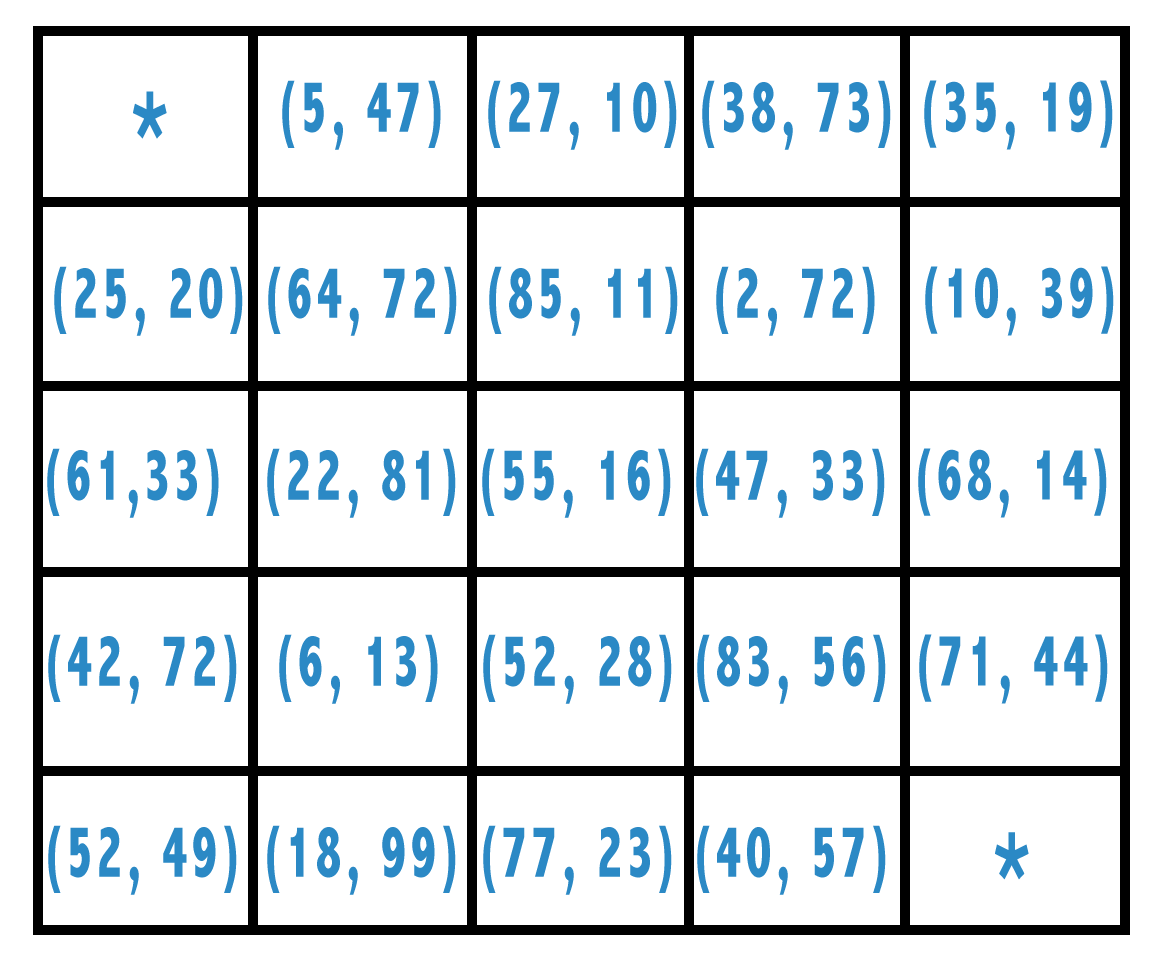
<style>
.page{position:relative;width:1162px;height:964px;background:#ffffff}
.page>*{position:absolute;margin:0}
.t1{font:75px "AbadiMT-CondensedExtraBold";letter-spacing:0.075em;color:#2b89c5;scale:0.68 1}
.t2{font:150px "AbadiMT-CondensedExtraBold";letter-spacing:0.075em;color:#2b89c5;scale:0.68 1}
</style>
<div class="page">
<p class="t1" style="left:282px;top:80px;width:159px;height:70px">(5, 47)</p>
<p class="t1" style="left:488px;top:80px;width:189px;height:70px">(27, 10)</p>
<p class="t1" style="left:702px;top:80px;width:189px;height:70px">(38, 73)</p>
<p class="t1" style="left:924px;top:80px;width:189px;height:70px">(35, 19)</p>
<p class="t2" style="left:133px;top:91px;width:34px;height:48px">*</p>
<p class="t1" style="left:54px;top:266px;width:189px;height:70px">(25, 20)</p>
<p class="t1" style="left:268px;top:266px;width:189px;height:70px">(64, 72)</p>
<p class="t1" style="left:489px;top:266px;width:189px;height:70px">(85, 11)</p>
<p class="t1" style="left:716px;top:266px;width:159px;height:70px">(2, 72)</p>
<p class="t1" style="left:925px;top:266px;width:189px;height:70px">(10, 39)</p>
<p class="t1" style="left:47px;top:448px;width:172px;height:70px">(61,33)</p>
<p class="t1" style="left:267px;top:448px;width:189px;height:70px">(22, 81)</p>
<p class="t1" style="left:482px;top:448px;width:189px;height:70px">(55, 16)</p>
<p class="t1" style="left:696px;top:448px;width:189px;height:70px">(47, 33)</p>
<p class="t1" style="left:918px;top:448px;width:189px;height:70px">(68, 14)</p>
<p class="t1" style="left:48px;top:634px;width:189px;height:70px">(42, 72)</p>
<p class="t1" style="left:279px;top:634px;width:159px;height:70px">(6, 13)</p>
<p class="t1" style="left:483px;top:634px;width:189px;height:70px">(52, 28)</p>
<p class="t1" style="left:697px;top:634px;width:189px;height:70px">(83, 56)</p>
<p class="t1" style="left:919px;top:634px;width:189px;height:70px">(71, 44)</p>
<p class="t1" style="left:48px;top:825px;width:189px;height:70px">(52, 49)</p>
<p class="t1" style="left:267px;top:825px;width:189px;height:70px">(18, 99)</p>
<p class="t1" style="left:483px;top:825px;width:189px;height:70px">(77, 23)</p>
<p class="t1" style="left:697px;top:825px;width:189px;height:70px">(40, 57)</p>
<p class="t2" style="left:995px;top:832px;width:34px;height:48px">*</p>
</div>
